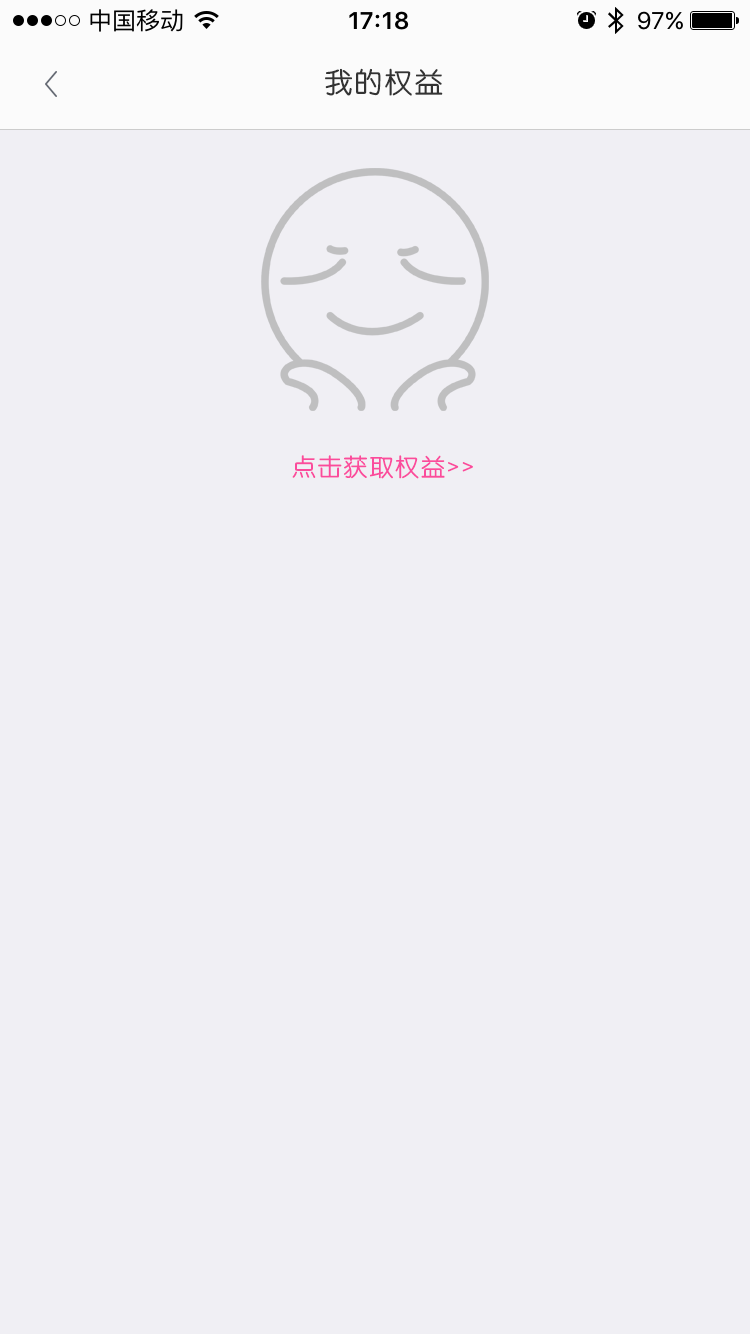
<style>
.page{position:relative;width:750px;height:1334px;background:#f0eff4}
.page>*{position:absolute;margin:0}
.t1{font:28px "STYuanti-SC-Regular";letter-spacing:0.075em;color:#333333}
.t2{font:24px "STYuanti-SC-Regular";letter-spacing:0.075em;color:#fb4b9c}
</style>
<div class="page">
<p class="t1" style="left:325px;top:68px;width:118px;height:28px">我的权益</p>
<p class="t2" style="left:292px;top:455px;width:181px;height:24px">点击获取权益&gt;&gt;</p>
</div>
